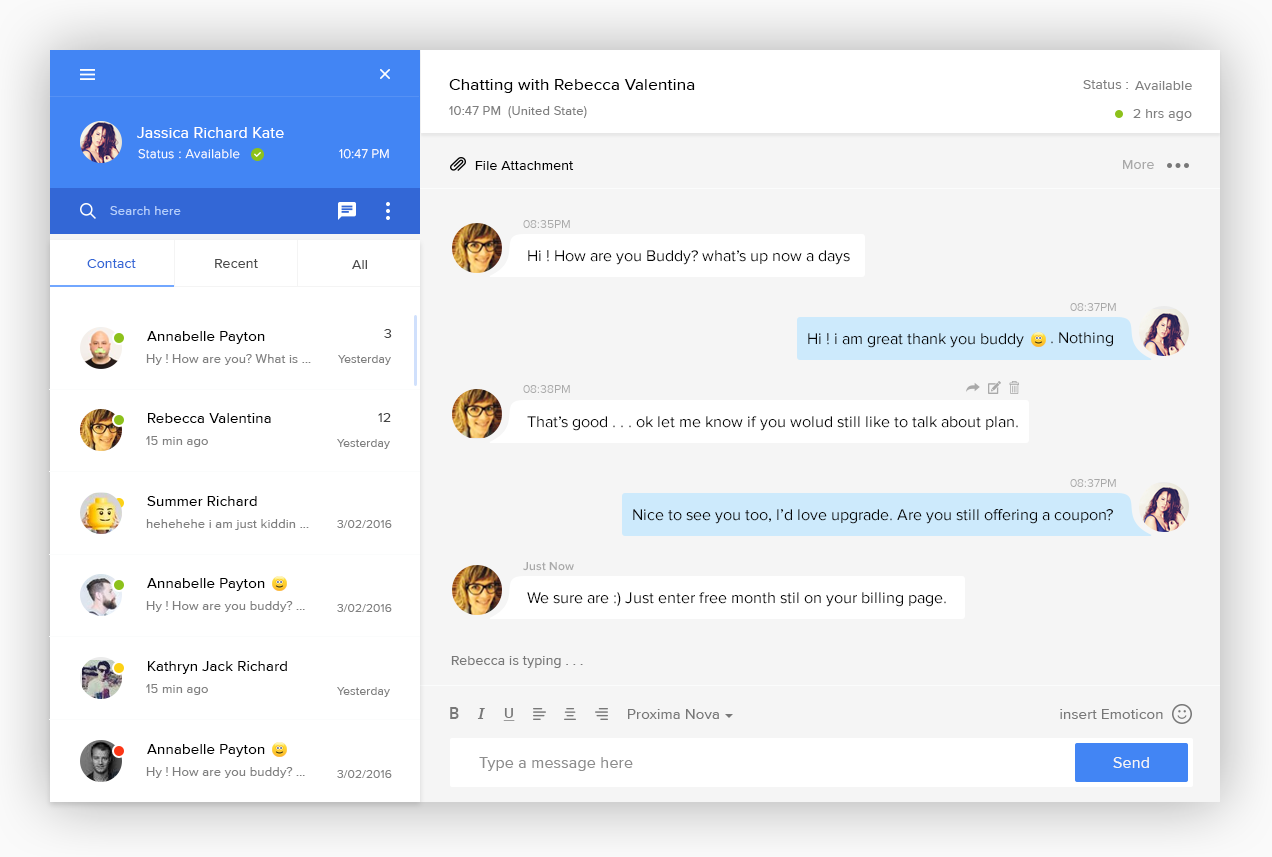
<style>
.page{position:relative;width:1272px;height:857px;background:#f5f5f5}
.page>*{position:absolute;margin:0}
.t1{font:17px "ProximaNova-Regular";letter-spacing:0.012em;color:#000000}
.t2{font:14px "ProximaNova-Regular";letter-spacing:0.012em;color:#808080}
.t3{font:13px "ProximaNova-Regular";letter-spacing:0.012em;color:#808080}
.t4{font:16px "ProximaNova-Regular";letter-spacing:0.012em;color:#ffffff}
.t5{font:13px "ProximaNova-Light";letter-spacing:0.032em;color:#ffffff}
.t6{font:13px "ProximaNova-Light";letter-spacing:0.012em;color:#ffffff}
.t7{font:14px "ProximaNova-Regular";letter-spacing:0.012em;color:#000000}
.t8{font:14px "ProximaNova-Regular";letter-spacing:0.012em;color:#a9a9a9}
.t9{font:13px "ProximaNova-Regular";letter-spacing:0.012em;color:#b3cefb}
.t10{font:12px "ProximaNova-Regular";color:#a9a9a9}
.t11{font:16px "ProximaNova-Regular";color:#070707}
.t12{font:14px "ProximaNova-Regular";letter-spacing:0.012em;color:#3367d6}
.t13{font:14px "ProximaNova-Regular";letter-spacing:0.012em;color:#4b4b4b}
.t14{font:14px "ProximaNova-Regular";letter-spacing:0.012em;color:#454545}
.t15{font:15px "ProximaNova-Regular";letter-spacing:0.012em;color:#000000}
.t16{font:16.3px "ProximaNova-Regular";color:#070707}
.t17{font:12px "ProximaNova-Regular";letter-spacing:0.012em;color:#808080}
.t18{font:12px "ProximaNova-Semibold";color:#a9a9a9}
.t19{font:14px "ProximaNova-Regular";letter-spacing:0.012em;color:#787878}
.t20{font:16px "OpenSans-Semibold";letter-spacing:0.012em;color:#787878}
.t21{font:16px "PalatinoLinotype-BoldItalic";letter-spacing:0.012em;color:#787878}
.t22{font:14px "OpenSans-Semibold";letter-spacing:0.012em;color:#787878;text-decoration:underline}
.t23{font:15px "ProximaNova-Regular";letter-spacing:0.012em;color:#787878}
.t24{font:16px "ProximaNova-Regular";letter-spacing:0.012em;color:#8d8d8d}
.t25{font:16px "ProximaNova-Regular";letter-spacing:0.012em;color:#f5f5f5}
</style>
<div class="page">
<p class="t1" style="left:449px;top:79px;width:246px;height:14px">Chatting with Rebecca Valentina</p>
<p class="t2" style="left:1083px;top:80px;width:45px;height:9px">Status :</p>
<p class="t2" style="left:1135px;top:81px;width:57px;height:9px">Available</p>
<p class="t3" style="left:449px;top:106px;width:138px;height:12px">10:47 PM  (United State)</p>
<p class="t2" style="left:1133px;top:109px;width:59px;height:12px">2 hrs ago</p>
<p class="t4" style="left:137px;top:127px;width:147px;height:11px">Jassica Richard Kate</p>
<p class="t5" style="left:138px;top:149px;width:102px;height:10px">Status : Available</p>
<p class="t6" style="left:339px;top:149px;width:50px;height:10px">10:47 PM</p>
<p class="t7" style="left:475px;top:161px;width:99px;height:9px">File Attachment</p>
<p class="t8" style="left:1123px;top:160px;width:31px;height:9px">More</p>
<p class="t9" style="left:110px;top:206px;width:71px;height:9px">Search here</p>
<p class="t10" style="left:523px;top:220px;width:47px;height:8px">08:35PM</p>
<p class="t11" style="left:528px;top:250px;width:322px;height:15px">Hi ! How are you Buddy? what’s up now a days</p>
<p class="t12" style="left:87px;top:259px;width:49px;height:9px">Contact</p>
<p class="t13" style="left:215px;top:259px;width:43px;height:9px">Recent</p>
<p class="t13" style="left:352px;top:260px;width:15px;height:9px">All</p>
<p class="t10" style="left:1070px;top:303px;width:46px;height:8px">08:37PM</p>
<p class="t14" style="left:384px;top:329px;width:8px;height:9px">3</p>
<p class="t15" style="left:147px;top:331px;width:118px;height:13px">Annabelle Payton</p>
<p class="t16" style="left:808px;top:333px;width:216px;height:15px">Hi ! i am great thank you buddy</p>
<p class="t11" style="left:1051px;top:332px;width:62px;height:15px">. Nothing</p>
<p class="t3" style="left:146px;top:354px;width:165px;height:11px">Hy ! How are you? What is ...</p>
<p class="t17" style="left:338px;top:355px;width:53px;height:10px">Yesterday</p>
<p class="t10" style="left:523px;top:385px;width:47px;height:8px">08:38PM</p>
<p class="t15" style="left:148px;top:413px;width:123px;height:10px">Rebecca Valentina</p>
<p class="t14" style="left:378px;top:413px;width:13px;height:9px">12</p>
<p class="t11" style="left:527px;top:416px;width:491px;height:15px">That’s good . . . ok let me know if you wolud still like to talk about plan.</p>
<p class="t3" style="left:146px;top:436px;width:62px;height:11px">15 min ago</p>
<p class="t17" style="left:337px;top:439px;width:53px;height:10px">Yesterday</p>
<p class="t10" style="left:1070px;top:479px;width:46px;height:8px">08:37PM</p>
<p class="t15" style="left:147px;top:496px;width:110px;height:10px">Summer Richard</p>
<p class="t16" style="left:633px;top:509px;width:480px;height:15px">Nice to see you too, I’d love upgrade. Are you still offering a coupon?</p>
<p class="t3" style="left:146px;top:519px;width:163px;height:11px">hehehehe i am just kiddin ...</p>
<p class="t17" style="left:337px;top:520px;width:55px;height:8px">3/02/2016</p>
<p class="t18" style="left:523px;top:562px;width:51px;height:9px">Just Now</p>
<p class="t15" style="left:147px;top:578px;width:118px;height:13px">Annabelle Payton</p>
<p class="t11" style="left:527px;top:592px;width:419px;height:15px">We sure are :) Just enter free month stil on your billing page.</p>
<p class="t3" style="left:146px;top:601px;width:159px;height:11px">Hy ! How are you buddy? ...</p>
<p class="t17" style="left:337px;top:604px;width:55px;height:8px">3/02/2016</p>
<p class="t15" style="left:148px;top:661px;width:139px;height:13px">Kathryn Jack Richard</p>
<p class="t19" style="left:451px;top:656px;width:132px;height:12px">Rebecca is typing . . .</p>
<p class="t3" style="left:146px;top:684px;width:62px;height:11px">15 min ago</p>
<p class="t17" style="left:337px;top:687px;width:53px;height:10px">Yesterday</p>
<p class="t20" style="left:450px;top:707px;width:9px;height:12px">B</p>
<p class="t21" style="left:477px;top:708px;width:8px;height:11px">I</p>
<p class="t22" style="left:503px;top:708px;width:12px;height:13px">U</p>
<p class="t23" style="left:628px;top:709px;width:91px;height:10px">Proxima Nova</p>
<p class="t23" style="left:1060px;top:709px;width:103px;height:10px">insert Emoticon</p>
<p class="t15" style="left:147px;top:744px;width:118px;height:13px">Annabelle Payton</p>
<p class="t24" style="left:479px;top:757px;width:154px;height:14px">Type a message here</p>
<p class="t25" style="left:1113px;top:757px;width:36px;height:11px">Send</p>
<p class="t3" style="left:146px;top:767px;width:159px;height:11px">Hy ! How are you buddy? ...</p>
<p class="t17" style="left:337px;top:770px;width:55px;height:8px">3/02/2016</p>
</div>
